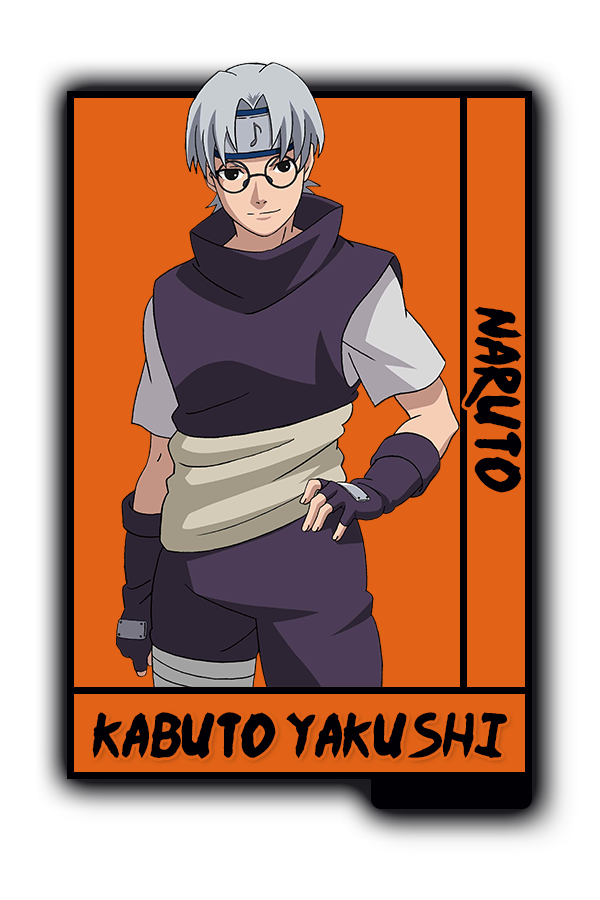
<style>
.page{position:relative;width:600px;height:900px;background:#e26317}
.page>*{position:absolute;margin:0}
.t1{font:52px "Ninja-Naruto";color:#010005}
.t2{font:50.5px "Ninja-Naruto";color:#010005}
</style>
<div class="page">
<p class="t1" style="left:464px;top:307px;width:59px;height:186px;rotate:90deg">Naruto</p>
<p class="t2" style="left:92px;top:712px;width:415px;height:47px">Kabuto Yakushi</p>
</div>
